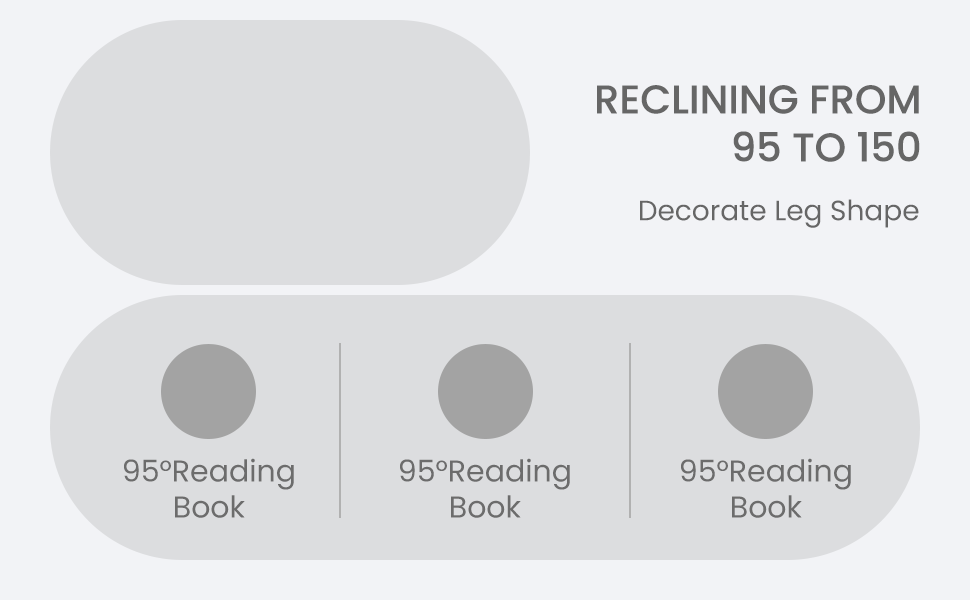
<style>
.page{position:relative;width:970px;height:600px;background:#dcdddf}
.page>*{position:absolute;margin:0}
.t1{font:40px "Poppins-Medium";color:#666666;text-transform:uppercase}
.t2{font:28px "Poppins-Regular";color:#666666}
.t3{font:30px "Poppins-Regular";color:#6c6c6c}
</style>
<div class="page">
<p class="t1" style="left:597px;top:85px;width:323px;height:77px;text-align:right">Reclining from<br>95 to 150</p>
<p class="t2" style="left:640px;top:199px;width:279px;height:29px">Decorate Leg Shape</p>
<p class="t3" style="left:124px;top:458px;width:170px;height:60px;text-align:center">95°Reading<br>Book</p>
<p class="t3" style="left:400px;top:458px;width:170px;height:60px;text-align:center">95°Reading<br>Book</p>
<p class="t3" style="left:681px;top:458px;width:170px;height:60px;text-align:center">95°Reading<br>Book</p>
</div>
